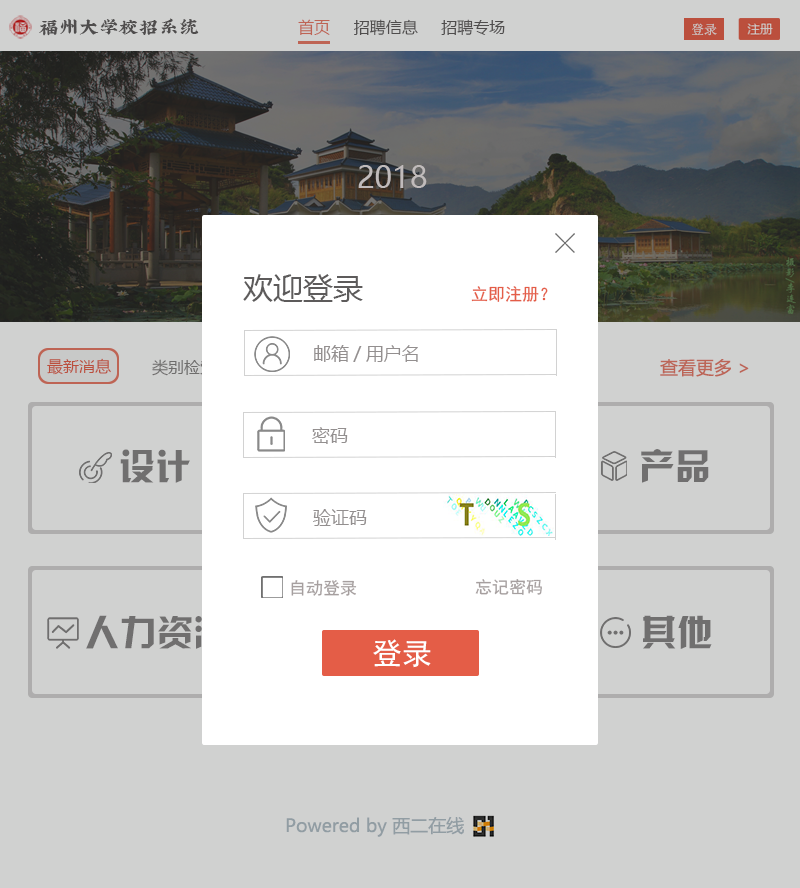
<style>
.page{position:relative;width:800px;height:888px;background:#d0d1d0}
.page>*{position:absolute;margin:0}
.t1{font:20px "XiQuezhaopaiti-Regular";color:#5d5b5b}
.t2{font:16px "MicrosoftYaHei";color:#5d5b5b}
.t3{font:16px "MicrosoftYaHei";color:#e87764}
.t4{font:30px "MicrosoftYaHeiUI";color:#c0bbbb}
.t5{font:30px "MicrosoftYaHei";color:#5d5b5b}
.t6{font:17px "SimHei";color:#e45d47}
.t7{font:18px "MicrosoftYaHei";color:#938f8f}
.t8{font:16px "MicrosoftYaHeiUI";color:#bb4f3d}
.t9{font:16px "MicrosoftYaHeiUI";color:#848282}
.t10{font:18px "MicrosoftYaHei";color:#bc6557}
.t11{font:36px "HYk2gj";letter-spacing:0.01em;color:#868585}
.t12{font:17px "SimHei";color:#a69f9f}
.t13{font:30px "SimHei";color:#ffffff}
.t14{font:18px "MicrosoftYaHei";color:#919da3}
</style>
<div class="page">
<p class="t1" style="left:39px;top:18px;width:160px;height:18px">福州大学校招系统</p>
<p class="t2" style="left:298px;top:19px;width:207px;height:17px"><span class="t3">首页</span>     招聘信息     招聘专场</p>
<p class="t4" style="left:358px;top:165px;width:69px;height:23px">2018</p>
<p class="t5" style="left:243px;top:274px;width:120px;height:28px">欢迎登录</p>
<p class="t6" style="left:471px;top:286px;width:77px;height:16px">立即注册？</p>
<p class="t7" style="left:314px;top:345px;width:104px;height:17px">邮箱/用户名</p>
<p class="t8" style="left:47px;top:358px;width:64px;height:17px">最新消息</p>
<p class="t9" style="left:152px;top:359px;width:64px;height:17px">类别检索</p>
<p class="t10" style="left:660px;top:359px;width:89px;height:18px">查看更多 &gt;</p>
<p class="t7" style="left:312px;top:427px;width:36px;height:17px">密码</p>
<p class="t11" style="left:120px;top:449px;width:70px;height:34px">设计</p>
<p class="t11" style="left:641px;top:449px;width:68px;height:34px">产品</p>
<p class="t7" style="left:313px;top:509px;width:54px;height:17px">验证码</p>
<p class="t12" style="left:291px;top:580px;width:66px;height:16px">自动登录</p>
<p class="t12" style="left:475px;top:579px;width:67px;height:16px">忘记密码</p>
<p class="t11" style="left:86px;top:615px;width:141px;height:35px">人力资源</p>
<p class="t11" style="left:643px;top:615px;width:69px;height:34px">其他</p>
<p class="t13" style="left:373px;top:639px;width:58px;height:29px">登录</p>
<p class="t14" style="left:286px;top:816px;width:178px;height:21px">Powered by 西二在线</p>
</div>
